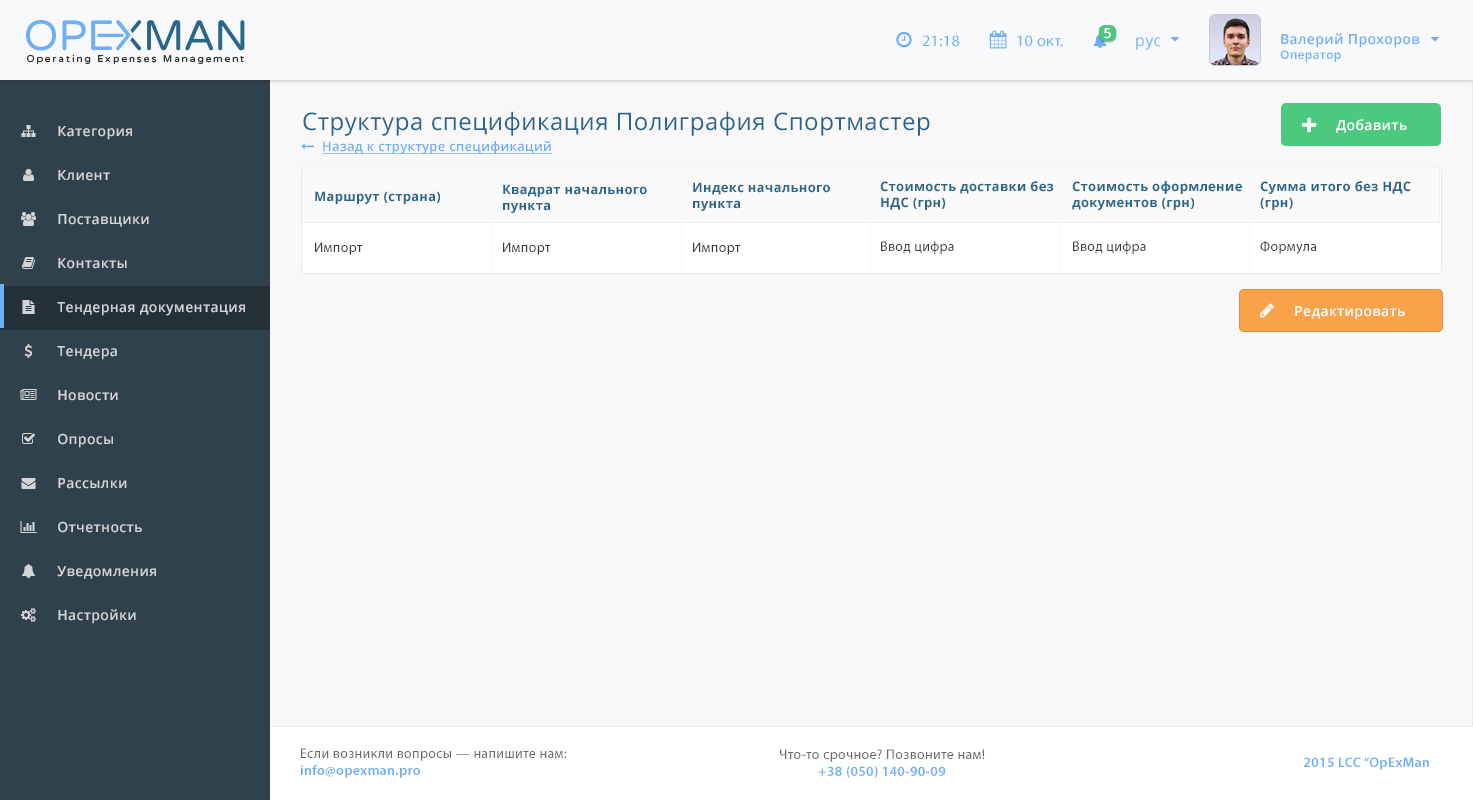
<style>
.page{position:relative;width:1473px;height:800px;background:#f8f8f8}
.page>*{position:absolute;margin:0}
.t1{font:13.9px "OpenSans-Semibold";letter-spacing:0.025em;color:#ffffff}
.t2{font:15.9px "MyriadPro-Regular";letter-spacing:0.025em;color:#6faff8}
.t3{font:15.9px "OpenSans";letter-spacing:0.025em;color:#6eaff8}
.t4{font:13.9px "OpenSans-Semibold";letter-spacing:0.025em;color:#6eaef7}
.t5{font:12px "OpenSans-Semibold";letter-spacing:0.025em;color:#6eaef7}
.t6{font:23.9px "OpenSans";letter-spacing:0.025em;color:#29658b}
.t7{font:13.9px "OpenSans-Semibold";letter-spacing:0.025em;color:#d2d5d7}
.t8{font:13px "OpenSans-Semibold";letter-spacing:0.025em;color:#6faff8;text-decoration:underline}
.t9{font:13px "OpenSans-Bold";letter-spacing:0.025em;color:#29668b}
.t10{font:13.9px "MyriadPro-Regular";letter-spacing:0.025em;color:#3a3a3a}
.t11{font:13.9px "MyriadPro-Regular";letter-spacing:0.025em;color:#696969}
.t12{font:13.9px "MyriadPro-Semibold";letter-spacing:0.025em;color:#6eaef8}
</style>
<div class="page">
<p class="t1" style="left:1104px;top:28px;width:7px;height:11px">5</p>
<p class="t2" style="left:922px;top:35px;width:38px;height:12px">21:18</p>
<p class="t2" style="left:1017px;top:35px;width:46px;height:12px">10 окт.</p>
<p class="t3" style="left:1136px;top:37px;width:25px;height:13px">рус</p>
<p class="t4" style="left:1280px;top:33px;width:140px;height:29px">Валерий Прохоров<br><span class="t5">Оператор</span></p>
<p class="t6" style="left:303px;top:111px;width:627px;height:25px">Структура спецификация Полиграфия Спортмастер</p>
<p class="t7" style="left:58px;top:126px;width:74px;height:14px">Категория</p>
<p class="t1" style="left:1336px;top:119px;width:71px;height:14px">Добавить</p>
<p class="t8" style="left:322px;top:141px;width:231px;height:13px">Назад к структуре спецификаций</p>
<p class="t7" style="left:58px;top:170px;width:52px;height:11px">Клиент</p>
<p class="t9" style="left:503px;top:184px;width:144px;height:29px">Квадрат начального<br>пункта</p>
<p class="t9" style="left:693px;top:182px;width:137px;height:29px">Индекс начального<br>пункта</p>
<p class="t9" style="left:880px;top:181px;width:174px;height:29px">Стоимость доставки без<br>НДС (грн)</p>
<p class="t9" style="left:1072px;top:181px;width:170px;height:29px">Стоимость оформление <br>документов (грн)</p>
<p class="t9" style="left:1260px;top:181px;width:151px;height:29px">Сумма итого без НДС<br>(грн)</p>
<p class="t9" style="left:315px;top:191px;width:126px;height:13px">Маршрут (страна)</p>
<p class="t7" style="left:58px;top:214px;width:91px;height:13px">Поставщики</p>
<p class="t10" style="left:315px;top:242px;width:48px;height:13px">Импорт</p>
<p class="t10" style="left:503px;top:242px;width:48px;height:13px">Импорт</p>
<p class="t10" style="left:693px;top:242px;width:48px;height:13px">Импорт</p>
<p class="t10" style="left:881px;top:241px;width:73px;height:13px">Ввод цифра</p>
<p class="t10" style="left:1073px;top:241px;width:73px;height:13px">Ввод цифра</p>
<p class="t10" style="left:1260px;top:241px;width:56px;height:13px">Формула</p>
<p class="t7" style="left:58px;top:258px;width:69px;height:11px">Контакты</p>
<p class="t7" style="left:57px;top:302px;width:188px;height:14px">Тендерная документация</p>
<p class="t1" style="left:1295px;top:306px;width:110px;height:14px">Редактировать</p>
<p class="t7" style="left:57px;top:346px;width:60px;height:14px">Тендера</p>
<p class="t7" style="left:58px;top:390px;width:60px;height:11px">Новости</p>
<p class="t7" style="left:58px;top:433px;width:55px;height:15px">Опросы</p>
<p class="t7" style="left:58px;top:478px;width:69px;height:11px">Рассылки</p>
<p class="t7" style="left:58px;top:521px;width:84px;height:12px">Отчетность</p>
<p class="t7" style="left:57px;top:566px;width:99px;height:13px">Уведомления</p>
<p class="t7" style="left:58px;top:609px;width:78px;height:15px">Настройки</p>
<p class="t11" style="left:300px;top:748px;width:267px;height:30px">Если возникли вопросы — напишите нам:<br><span class="t12">info@opexman.pro</span></p>
<p class="t11" style="left:780px;top:749px;width:205px;height:29px;text-align:center">Что-то срочное? Позвоните нам!<br><span class="t12">+38 (050) 140-90-09</span></p>
<p class="t12" style="left:1304px;top:757px;width:125px;height:13px">2015 LCC “OpExMan</p>
</div>
